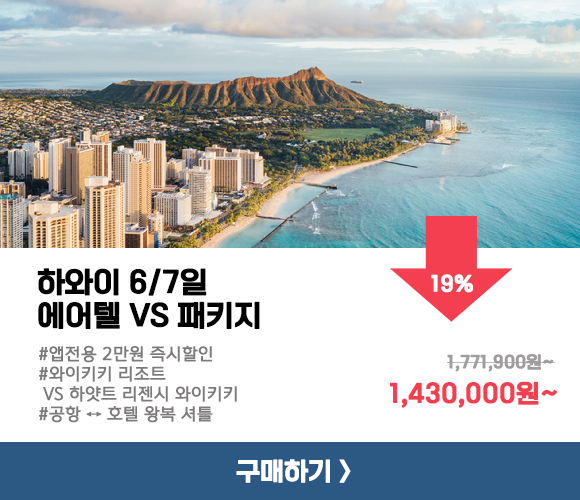
<style>
.page{position:relative;width:580px;height:500px;background:#ffffff}
.page>*{position:absolute;margin:0}
.t1{font:29.2px/33.3px "ONEMobileTitleOTFRegular";letter-spacing:-0.01em;color:#000000;font-weight:bold}
.t2{font:20.8px "ONEMobileTitleOTFRegular";letter-spacing:-0.01em;color:#ffffff;font-weight:bold}
.t3{font:16.7px "ONEMobileOTFRegular";letter-spacing:-0.01em;color:#7c7979;font-weight:bold}
.t4{font:16.7px "ONEMobileTitleOTFRegular";letter-spacing:-0.01em;color:#9f9d9d;font-weight:bold}
.t5{font:25px "ONEMobileTitleOTFRegular";letter-spacing:-0.01em;color:#f33f50;font-weight:bold}
.t6{font:25px "ONEMobileTitleOTFRegular";letter-spacing:-0.005em;color:#ffffff;font-weight:bold}
</style>
<div class="page">
<p class="t1" style="left:37px;top:268px;width:223px;height:61px">하와이 6/7일<br>에어텔 VS 패키지</p>
<p class="t2" style="left:431px;top:274px;width:42px;height:19px">19%</p>
<p class="t3" style="left:39px;top:345px;width:198px;height:78px">#앱전용 2만원 즉시할인<br>#와이키키 리조트<br> VS 하얏트 리젠시 와이키키<br>#공항 ↔ 호텔 왕복 셔틀</p>
<p class="t4" style="left:447px;top:354px;width:109px;height:18px">1,771,900원~</p>
<p class="t5" style="left:390px;top:381px;width:168px;height:27px">1,430,000원~</p>
<p class="t6" style="left:236px;top:459px;width:115px;height:24px">구매하기 &gt;</p>
</div>
